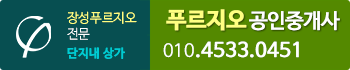
<style>
.page{position:relative;width:350px;height:70px;background:#548900}
.page>*{position:absolute;margin:0}
.t1{font:13px "NanumBarunGothicOTFLight";color:#ffff80}
.t2{font:13px "NanumBarunGothicOTFUltraLight";color:#ffffff}
.t3{font:20.2px "NanumBarunGothicOTF";letter-spacing:-0.025em;color:#ffffff;font-weight:bold}
.t4{font:22.5px "NanumBarunGothicOTFBold";letter-spacing:-0.025em;color:#ffff81;font-weight:bold}
.t5{font:19.5px "NanumBarunGothicOTF";color:#ffffff;font-weight:bold}
.t6{font:17.4px "NanumBarunGothicOTFUltraLight";color:#ffffff;font-weight:bold}
.t7{font:12px "NanumBarunGothicOTFBold";letter-spacing:0.025em;color:#00cbd1}
</style>
<div class="page">
<p class="t1" style="left:67px;top:11px;width:70px;height:29px">장성푸르지오<br><span class="t2">전문</span></p>
<p class="t3" style="left:166px;top:9px;width:174px;height:22px"><span class="t4">푸르지오 </span>공인중개사</p>
<p class="t5" style="left:163px;top:41px;width:136px;height:17px"><span class="t6">010</span>.4533.0451</p>
<p class="t7" style="left:67px;top:47px;width:58px;height:12px">단지내 상가</p>
</div>
